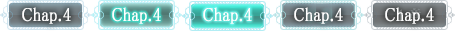
<style>
.page{position:relative;width:455px;height:31px}
.page>*{position:absolute;margin:0}
.t1{font:19px "MS-PMincho";color:#ffffff;font-weight:bold;scale:0.84 1}
</style>
<div class="page">
<p class="t1" style="left:22px;top:7px;width:49px;height:17px">Chap.4</p>
<p class="t1" style="left:112px;top:7px;width:49px;height:17px">Chap.4</p>
<p class="t1" style="left:203px;top:7px;width:49px;height:17px">Chap.4</p>
<p class="t1" style="left:294px;top:7px;width:49px;height:17px">Chap.4</p>
<p class="t1" style="left:385px;top:7px;width:49px;height:17px">Chap.4</p>
</div>
